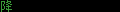
<style>
.page{position:relative;width:120px;height:12px;background:#000000}
.page>*{position:absolute;margin:0}
.t1{font:12px "SimSun";color:#3c9838}
</style>
<div class="page">
<p class="t1" style="left:1px;top:0px;width:11px;height:12px">降</p>
</div>
